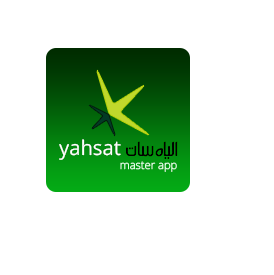
<style>
.page{position:relative;width:274px;height:275px;background:#ffffff}
.page>*{position:absolute;margin:0}
.t1{font:20.4px "OpenSans";color:#ffffff}
.t2{font:11.3px "OpenSans-Light";color:#e0ffe3}
</style>
<div class="page">
<p class="t1" style="left:59px;top:139px;width:62px;height:21px">yahsat</p>
<p class="t2" style="left:120px;top:161px;width:57px;height:11px">master app</p>
</div>
